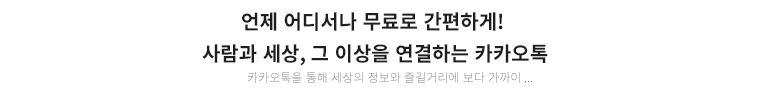
<style>
.page{position:relative;width:758px;height:100px;background:#ffffff}
.page>*{position:absolute;margin:0}
.t1{font:20px/32px "NotoSansKR-Bold";color:#1e1e1e}
.t2{font:12px "NotoSansKR-Light";color:#666666}
</style>
<div class="page">
<p class="t1" style="left:202px;top:12px;width:346px;height:54px;text-align:center">언제 어디서나 무료로 간편하게! <br>사람과 세상, 그 이상을 연결하는 카카오톡</p>
<p class="t2" style="left:248px;top:72px;width:285px;height:11px">카카오톡을 통해 세상의 정보와 즐길거리에 보다 가까이 ...</p>
</div>
